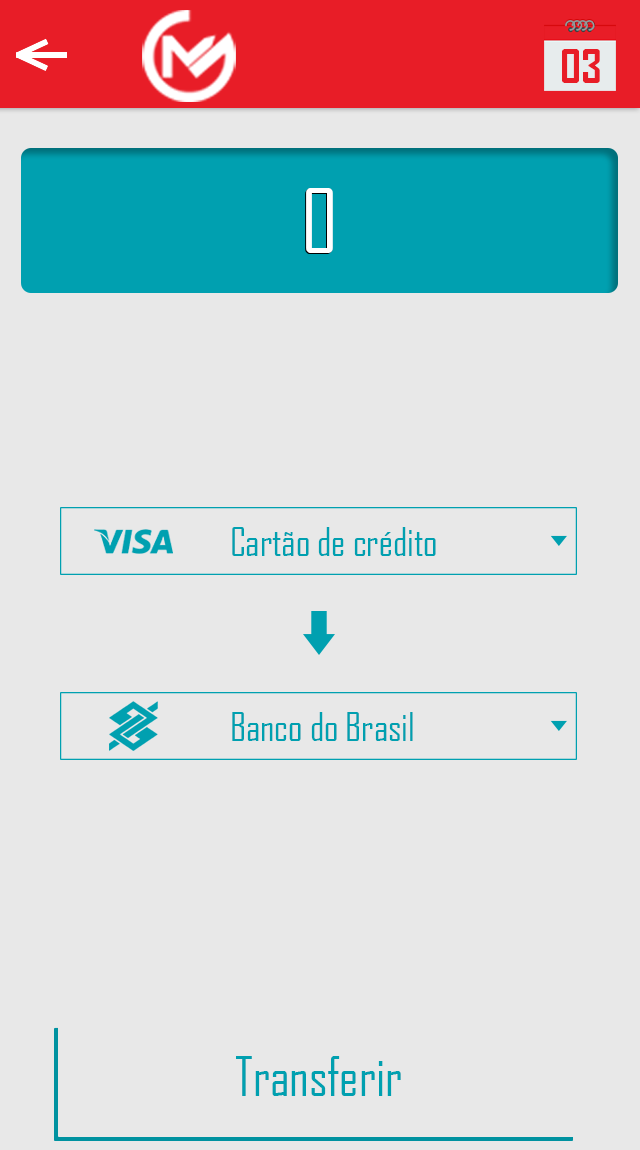
<style>
.page{position:relative;width:640px;height:1150px;background:#e8e8e8}
.page>*{position:absolute;margin:0}
.t1{font:45.3px "AgencyFB-Bold";color:#e81d27}
.t2{font:84.7px "AgencyFB-Reg";color:#ffffff}
.t3{font:37.5px "AgencyFB-Reg";color:#00a0b0}
.t4{font:51.7px "AgencyFB-Reg";color:#00a0b0}
</style>
<div class="page">
<p class="t1" style="left:562px;top:49px;width:38px;height:34px">03</p>
<p class="t2" style="left:306px;top:188px;width:27px;height:65px">0</p>
<p class="t3" style="left:232px;top:527px;width:204px;height:29px">Cartão de crédito</p>
<p class="t3" style="left:232px;top:712px;width:181px;height:29px">Banco do Brasil</p>
<p class="t4" style="left:236px;top:1056px;width:165px;height:40px">Transferir</p>
</div>
